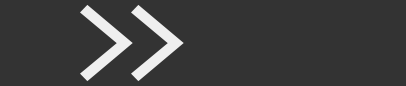
<style>
.page{position:relative;width:406px;height:86px;background:#333333}
.page>*{position:absolute;margin:0}
.t1{font:138.8px "Consolas";letter-spacing:-0.18em;color:#efefef}
</style>
<div class="page">
<p class="t1" style="left:80px;top:4px;width:104px;height:78px">&gt;&gt;</p>
</div>
